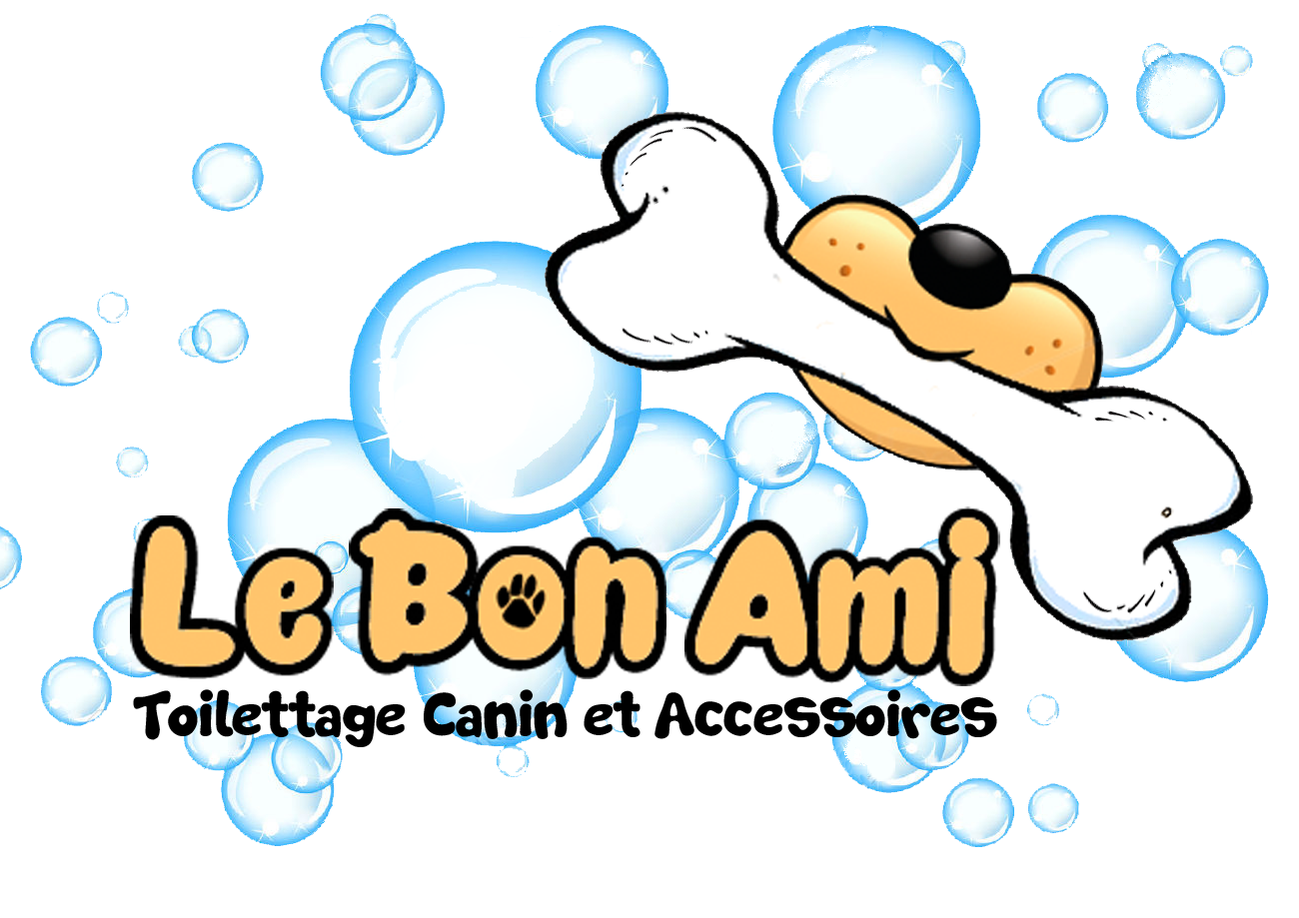
<style>
.page{position:relative;width:1299px;height:918px;background:#ffffff}
.page>*{position:absolute;margin:0}
.t1{font:62.2px "SoftMarshmallow";color:#000000}
</style>
<div class="page">
<p class="t1" style="left:133px;top:689px;width:864px;height:58px">Toilettage Canin et Accessoires</p>
</div>
